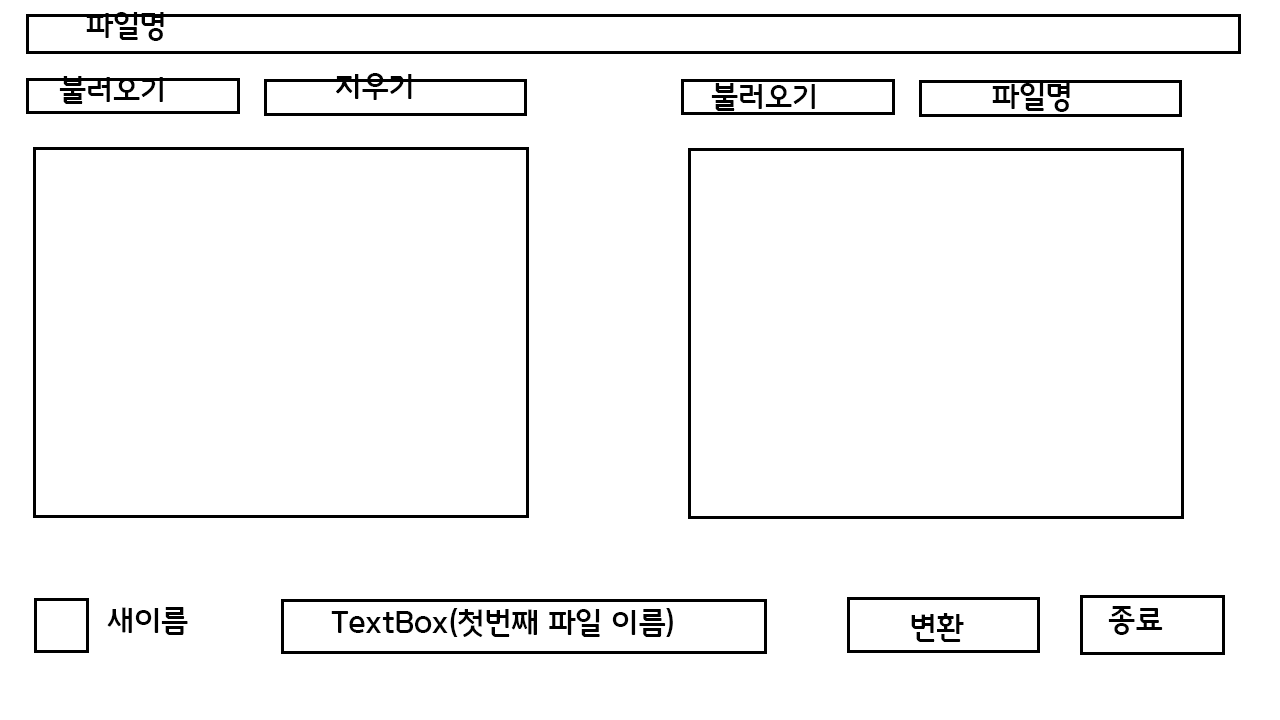
<style>
.page{position:relative;width:1280px;height:720px;background:#ffffff}
.page>*{position:absolute;margin:0}
.t1{font:30px "GodoM";color:#000000}
</style>
<div class="page">
<p class="t1" style="left:86px;top:12px;width:78px;height:29px">파일명</p>
<p class="t1" style="left:59px;top:76px;width:104px;height:28px">불러오기</p>
<p class="t1" style="left:336px;top:73px;width:76px;height:27px">지우기</p>
<p class="t1" style="left:711px;top:83px;width:104px;height:28px">불러오기</p>
<p class="t1" style="left:992px;top:83px;width:78px;height:29px">파일명</p>
<p class="t1" style="left:1108px;top:606px;width:55px;height:29px">종료</p>
<p class="t1" style="left:107px;top:607px;width:81px;height:28px">새이름</p>
<p class="t1" style="left:331px;top:608px;width:342px;height:29px">TextBox(첫번째 파일 이름)</p>
<p class="t1" style="left:911px;top:613px;width:53px;height:29px">변환</p>
</div>
